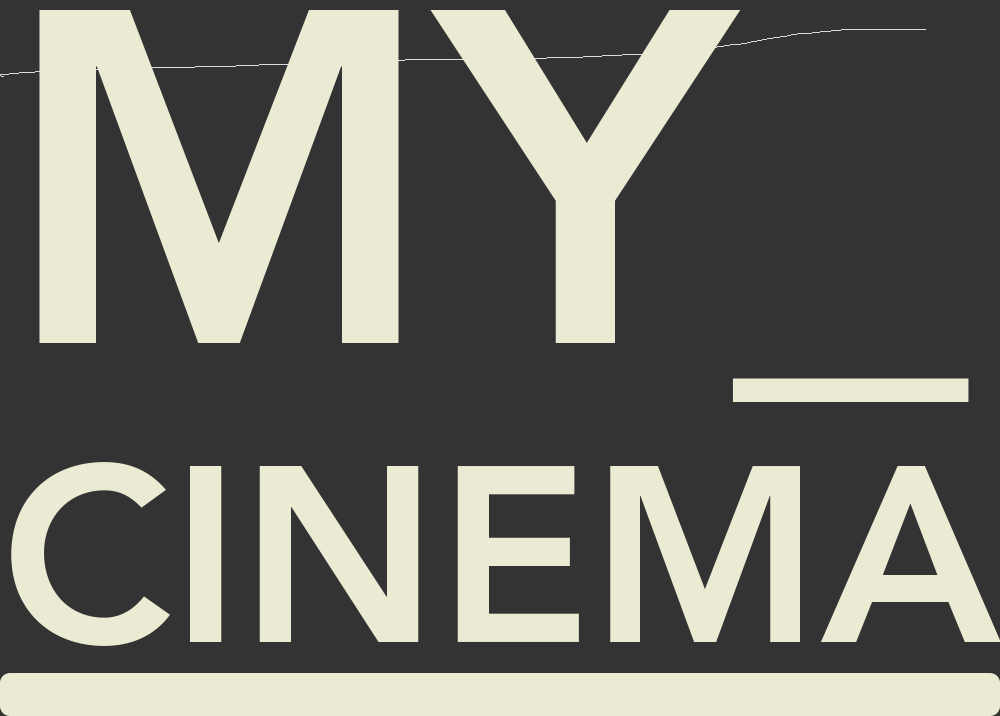
<style>
.page{position:relative;width:1000px;height:716px;background:#333333}
.page>*{position:absolute;margin:0}
.t1{font:248.9px "Avenir-Heavy";color:#ebebd3}
.t2{font:470.8px "Avenir-Heavy";color:#ebebd3}
</style>
<div class="page">
<p class="t1" style="left:11px;top:10px;width:990px;height:636px"><span class="t2">MY_<br></span>CINEMA</p>
</div>
